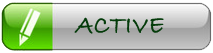
<style>
.page{position:relative;width:213px;height:53px}
.page>*{position:absolute;margin:0}
.t1{font:25px "BradleyHandITC";color:#043b0a;font-weight:bold}
</style>
<div class="page">
<p class="t1" style="left:74px;top:17px;width:90px;height:17px">ACTIVE</p>
</div>
